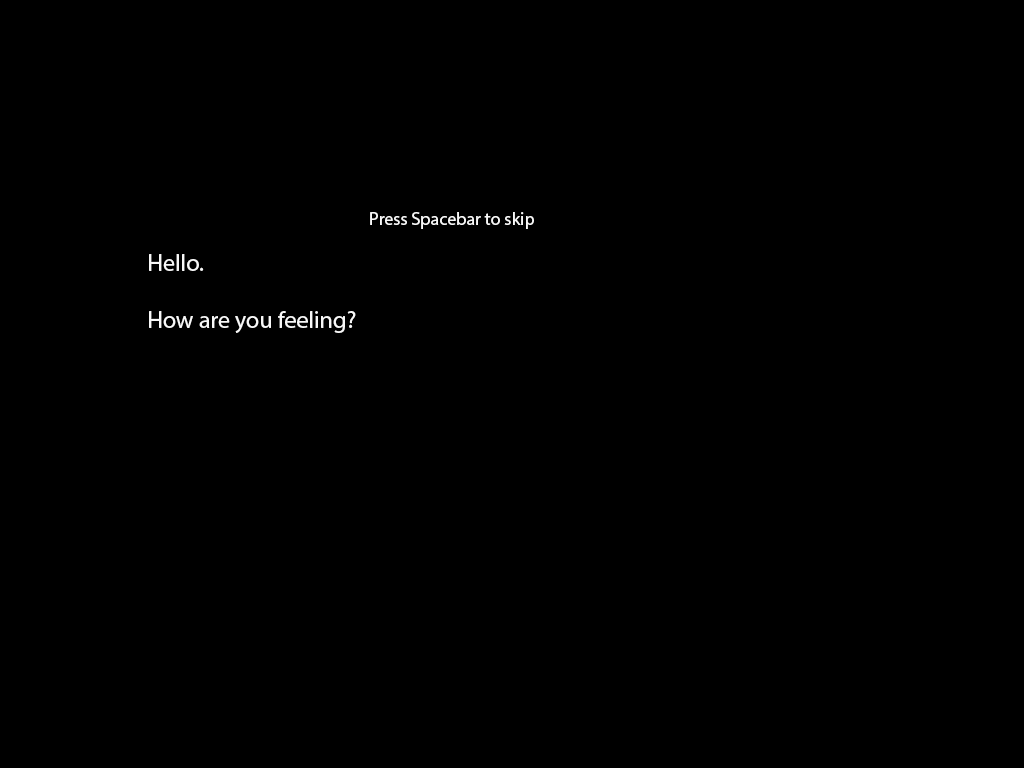
<style>
.page{position:relative;width:1024px;height:768px;background:#000000}
.page>*{position:absolute;margin:0}
.t1{font:18px "MyriadPro-Regular";color:#f8f8f8}
.t2{font:24px "MyriadPro-Regular";color:#f8f8f8}
</style>
<div class="page">
<p class="t1" style="left:370px;top:212px;width:164px;height:17px">Press Spacebar to skip</p>
<p class="t2" style="left:149px;top:254px;width:207px;height:79px">Hello.<br><br>How are you feeling?</p>
</div>
